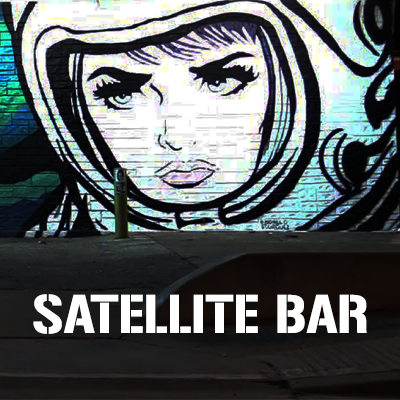
<style>
.page{position:relative;width:400px;height:400px}
.page>*{position:absolute;margin:0}
.t1{font:48px "Gunplay-Regular";color:#ffffff}
</style>
<div class="page">
<p class="t1" style="left:33px;top:294px;width:334px;height:40px">SATELLITE BAR</p>
</div>
